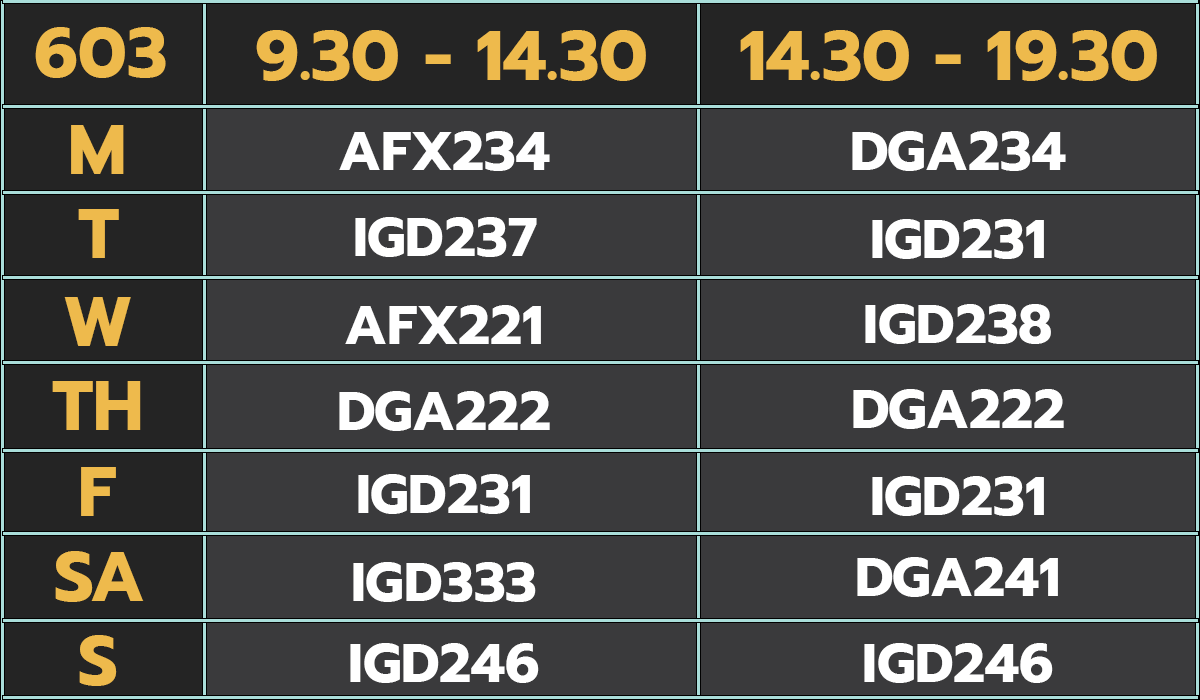
<style>
.page{position:relative;width:1200px;height:700px;background:#3a3a3c}
.page>*{position:absolute;margin:0}
.t1{font:70px "Prompt-Bold";color:#eeba4c}
.t2{font:55px "Prompt-Bold";color:#ffffff}
</style>
<div class="page">
<p class="t1" style="left:35px;top:27px;width:131px;height:51px">603</p>
<p class="t1" style="left:256px;top:30px;width:390px;height:51px">9.30 - 14.30</p>
<p class="t1" style="left:740px;top:30px;width:417px;height:51px">14.30 - 19.30</p>
<p class="t1" style="left:71px;top:125px;width:53px;height:49px">M</p>
<p class="t2" style="left:339px;top:131px;width:211px;height:40px">AFX234</p>
<p class="t2" style="left:852px;top:131px;width:214px;height:40px">DGA234</p>
<p class="t1" style="left:78px;top:209px;width:41px;height:49px">T</p>
<p class="t2" style="left:355px;top:217px;width:182px;height:40px">IGD237</p>
<p class="t2" style="left:872px;top:219px;width:172px;height:40px">IGD231</p>
<p class="t1" style="left:64px;top:297px;width:67px;height:49px">W</p>
<p class="t2" style="left:345px;top:305px;width:196px;height:39px">AFX221</p>
<p class="t2" style="left:865px;top:304px;width:186px;height:40px">IGD238</p>
<p class="t1" style="left:52px;top:381px;width:89px;height:49px">TH</p>
<p class="t2" style="left:853px;top:389px;width:211px;height:40px">DGA222</p>
<p class="t2" style="left:339px;top:391px;width:211px;height:40px">DGA222</p>
<p class="t1" style="left:81px;top:467px;width:35px;height:49px">F</p>
<p class="t2" style="left:358px;top:474px;width:172px;height:40px">IGD231</p>
<p class="t2" style="left:872px;top:476px;width:172px;height:40px">IGD231</p>
<p class="t1" style="left:55px;top:551px;width:89px;height:51px">SA</p>
<p class="t2" style="left:857px;top:557px;width:201px;height:40px">DGA241</p>
<p class="t2" style="left:353px;top:562px;width:183px;height:40px">IGD333</p>
<p class="t1" style="left:79px;top:635px;width:38px;height:51px">S</p>
<p class="t2" style="left:350px;top:643px;width:189px;height:40px">IGD246</p>
<p class="t2" style="left:864px;top:643px;width:189px;height:40px">IGD246</p>
</div>
